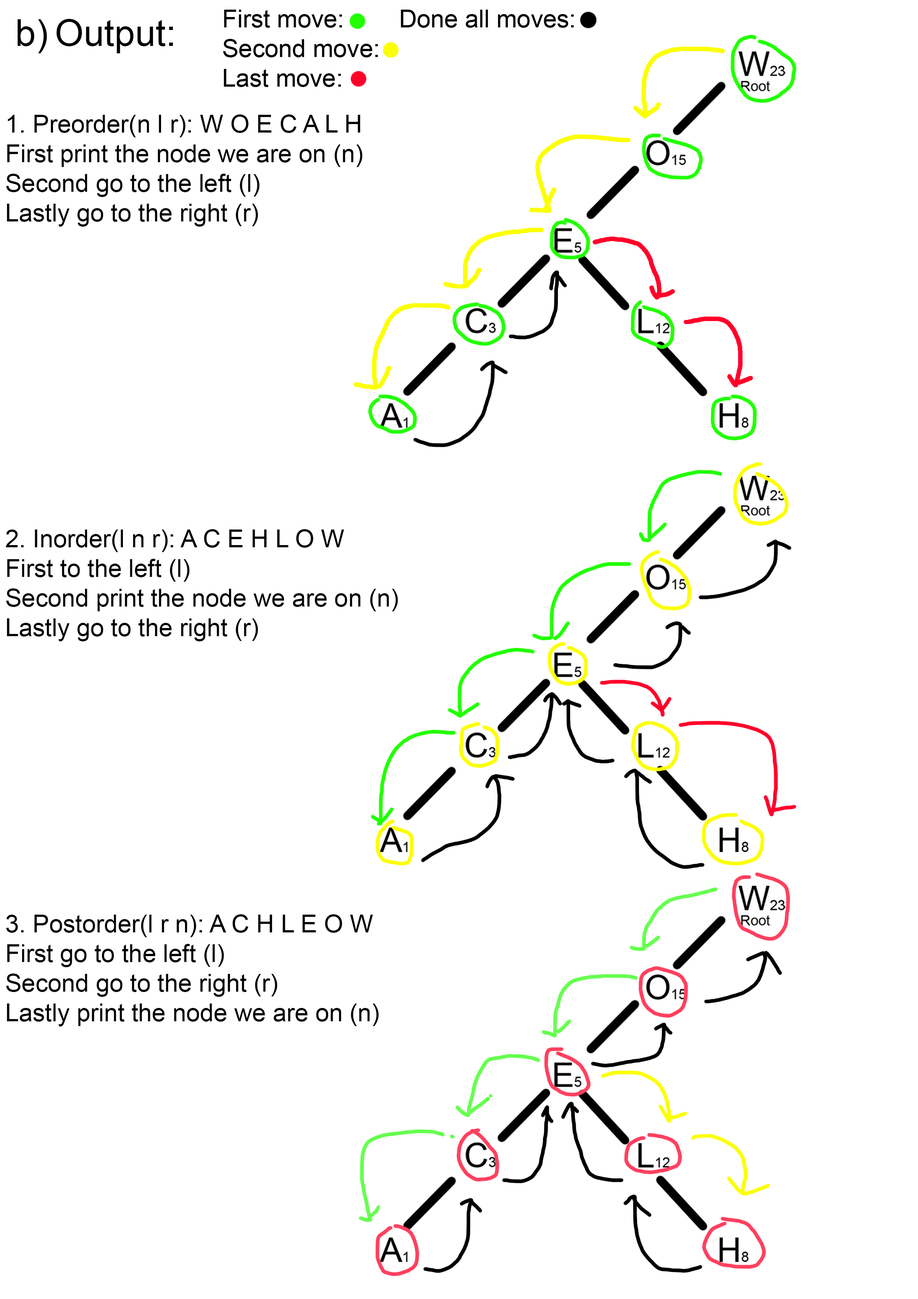
<style>
.page{position:relative;width:918px;height:1299px;background:#ffffff}
.page>*{position:absolute;margin:0}
.t1{font:37px "ArialMT";color:#000000}
.t2{font:24.7px "ArialMT";color:#000000}
</style>
<div class="page">
<p class="t1" style="left:17px;top:19px;width:30px;height:34px">b)</p>
<p class="t1" style="left:56px;top:19px;width:117px;height:34px">Output:</p>
<p class="t2" style="left:6px;top:114px;width:392px;height:912px">1. Preorder(n l r): W O E C A L H<br>First print the node we are on (n)<br>Second go to the left (l)<br>Lastly go to the right (r)<br><br><br><br><br><br><br><br><br><br><br>2. Inorder(l n r): A C E H L O W<br>First to the left (l)<br>Second print the node we are on (n)<br>Lastly go to the right (r)<br><br><br><br><br><br><br><br><br><br>3. Postorder(l r n): A C H L E O W<br>First go to the left (l)<br>Second go to the right (r)<br>Lastly print the node we are on (n)</p>
</div>
